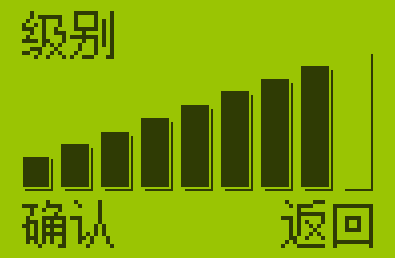
<style>
.page{position:relative;width:395px;height:258px;background:#9ac503}
.page>*{position:absolute;margin:0}
.t1{font:48px "FZXS12--GB1-0";color:#2f3b04}
</style>
<div class="page">
<p class="t1" style="left:22px;top:11px;width:92px;height:48px">级别</p>
<p class="t1" style="left:22px;top:200px;width:92px;height:48px">确认</p>
<p class="t1" style="left:281px;top:200px;width:92px;height:48px">返回</p>
</div>
